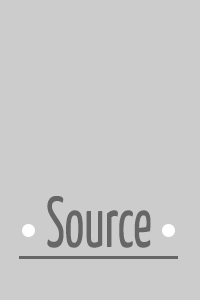
<style>
.page{position:relative;width:200px;height:300px;background:#cccccc}
.page>*{position:absolute;margin:0}
.t1{font:72px "YanoneKaffeesatz-Regular";color:#666666;scale:0.73 1}
</style>
<div class="page">
<p class="t1" style="left:47px;top:196px;width:104px;height:52px">Source</p>
</div>
